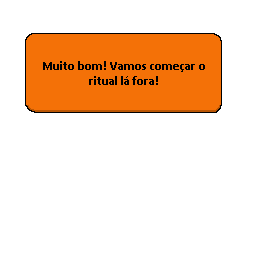
<style>
.page{position:relative;width:256px;height:256px;background:#ffffff}
.page>*{position:absolute;margin:0}
.t1{font:12.5px "Calibri-Bold";color:#000000}
</style>
<div class="page">
<p class="t1" style="left:43px;top:61px;width:162px;height:24px;text-align:center">Muito bom! Vamos começar o ritual lá fora!</p>
</div>
